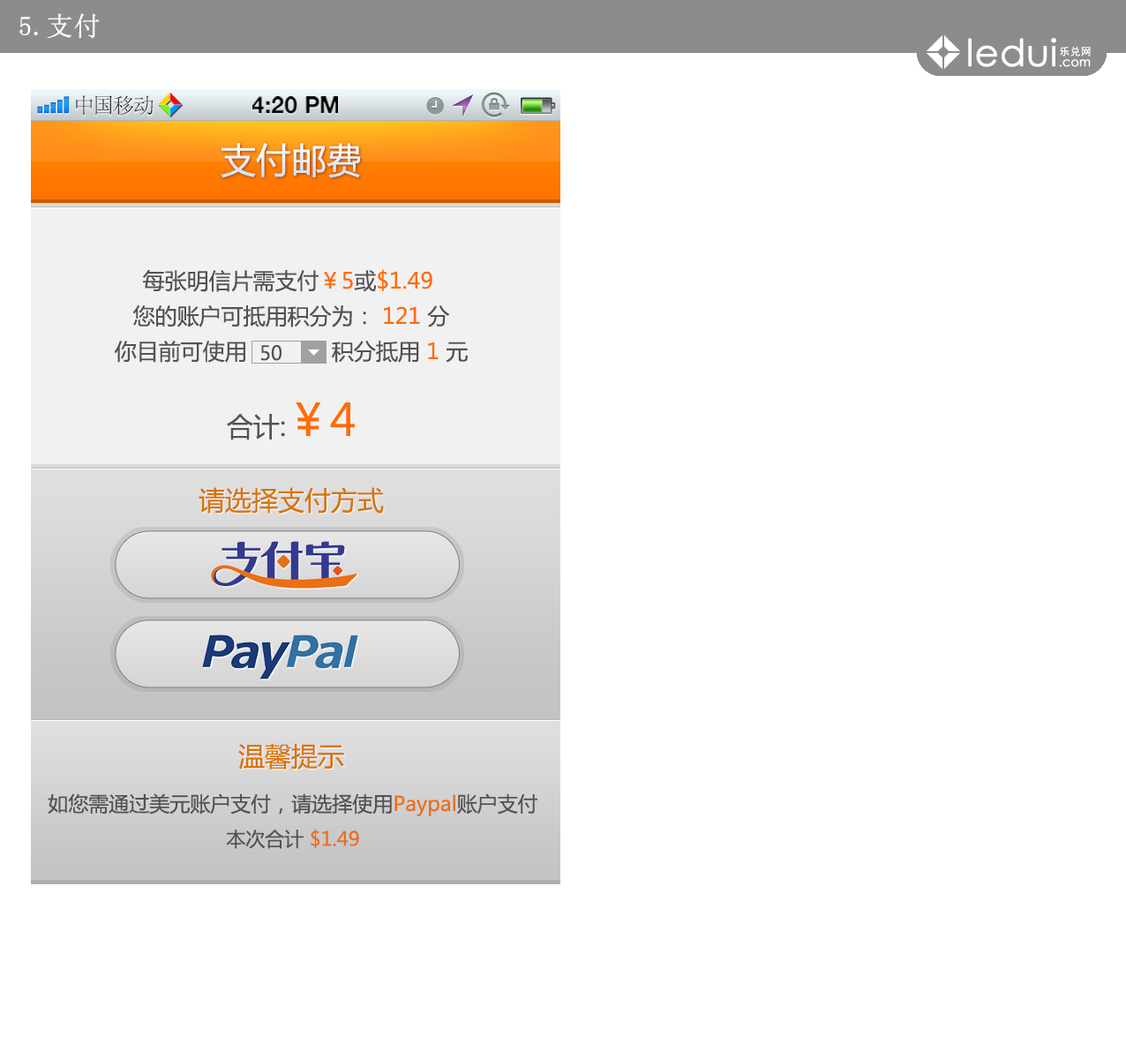
<style>
.page{position:relative;width:1126px;height:1059px;background:#ffffff}
.page>*{position:absolute;margin:0}
.t1{font:26.5px "SimSun";color:#ffffff;font-weight:bold}
.t2{font:21.5px "SimSun";color:#414141}
.t3{font:23.1px "HelveticaNeue-Bold";color:#000000;text-transform:uppercase}
.t4{font:35.3px "MicrosoftYaHei";color:#e9f1f7}
.t5{font:22.1px/35.3px "MicrosoftYaHei";color:#525252}
.t6{font:22.1px/35.3px "MicrosoftYaHei";color:#ff6c00}
.t7{font:19.4px "MicrosoftYaHei";color:#525252}
.t8{font:26.5px "MicrosoftYaHei";color:#525252}
.t9{font:44.1px "MicrosoftYaHei";color:#ff6c00}
.t10{font:26.5px "MicrosoftYaHei";color:#d7740a}
.t11{font:20.3px "MicrosoftYaHei";color:#525252}
.t12{font:20.3px "MicrosoftYaHei";color:#e97017}
.t13{font:19.4px "MicrosoftYaHei";color:#e97017}
</style>
<div class="page">
<p class="t1" style="left:19px;top:13px;width:81px;height:26px">5.支付</p>
<p class="t2" style="left:76px;top:95px;width:78px;height:21px">中国移动</p>
<p class="t3" style="left:252px;top:96px;width:86px;height:18px">4:20 PM</p>
<p class="t4" style="left:221px;top:143px;width:140px;height:35px">支付邮费</p>
<p class="t5" style="left:115px;top:269px;width:353px;height:94px;text-align:center">每张明信片需支付<span class="t6">￥5</span>或<span class="t6">$1.49</span> <br>您的账户可抵用积分为： <span class="t6">121 </span>分<br>你目前可使用             积分抵用 <span class="t6">1 </span>元</p>
<p class="t7" style="left:261px;top:345px;width:21px;height:16px">50</p>
<p class="t8" style="left:227px;top:402px;width:128px;height:38px">合计:<span class="t9">￥4</span></p>
<p class="t10" style="left:199px;top:487px;width:185px;height:27px">请选择支付方式</p>
<p class="t10" style="left:238px;top:743px;width:106px;height:27px">温馨提示</p>
<p class="t11" style="left:48px;top:793px;width:489px;height:56px;text-align:center">如您需通过美元账户支付，请选择使用<span class="t12">Paypal</span>账户支付<br><span class="t7">本次合计 </span><span class="t13">$1.49</span></p>
</div>
